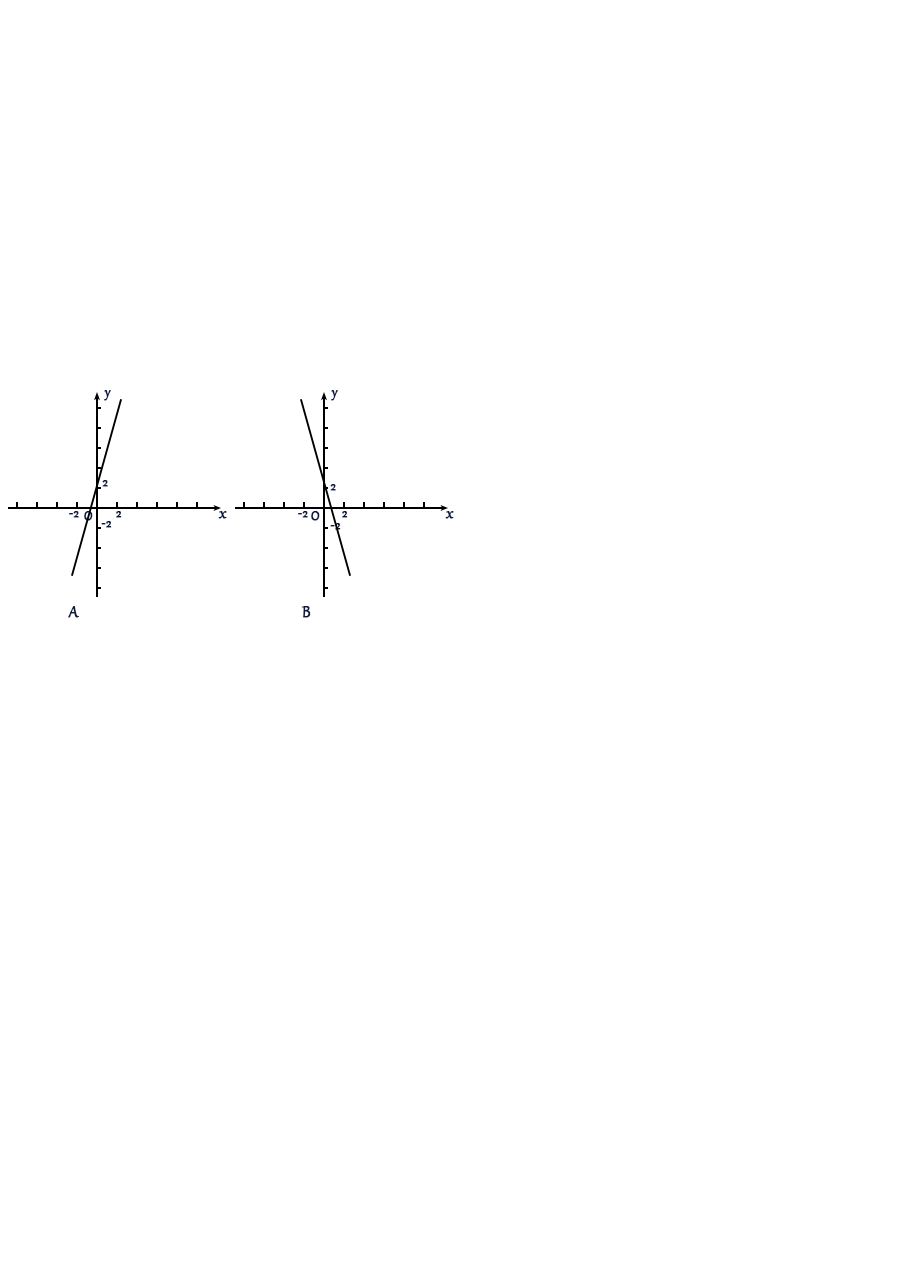
<style>
.page{position:relative;width:916px;height:1268px;background:#ffffff}
.page>*{position:absolute;margin:0}
.t1{font:16px "Gabriola";color:#081842;font-weight:bold}
.t2{font:12px "Gabriola";color:#081842;font-weight:bold}
.t3{font:18.7px "Gabriola";color:#081842;font-weight:bold}
</style>
<div class="page">
<p class="t1" style="left:104px;top:390px;width:7px;height:11px">y</p>
<p class="t1" style="left:331px;top:390px;width:7px;height:11px">y</p>
<p class="t2" style="left:102px;top:480px;width:6px;height:7px">2</p>
<p class="t2" style="left:330px;top:484px;width:6px;height:7px">2</p>
<p class="t2" style="left:69px;top:511px;width:10px;height:7px">-2</p>
<p class="t1" style="left:84px;top:511px;width:9px;height:10px">O</p>
<p class="t2" style="left:101px;top:521px;width:11px;height:7px">-2</p>
<p class="t2" style="left:116px;top:511px;width:6px;height:7px">2</p>
<p class="t3" style="left:218px;top:511px;width:9px;height:8px">x</p>
<p class="t2" style="left:298px;top:511px;width:10px;height:7px">-2</p>
<p class="t1" style="left:311px;top:511px;width:9px;height:10px">O</p>
<p class="t2" style="left:342px;top:511px;width:6px;height:7px">2</p>
<p class="t3" style="left:445px;top:511px;width:9px;height:8px">x</p>
<p class="t2" style="left:330px;top:523px;width:11px;height:7px">-2</p>
<p class="t3" style="left:68px;top:606px;width:11px;height:12px">A</p>
<p class="t3" style="left:301px;top:606px;width:10px;height:12px">B</p>
</div>
